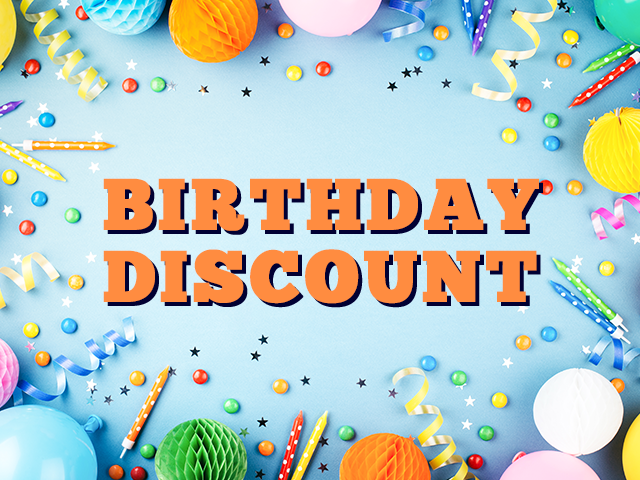
<style>
.page{position:relative;width:640px;height:480px}
.page>*{position:absolute;margin:0}
.t1{font:72px/72px "ChunkFive-Roman";letter-spacing:0.05em;color:#ff8c40;text-transform:uppercase;font-weight:bold}
</style>
<div class="page">
<p class="t1" style="left:103px;top:178px;width:436px;height:126px;text-align:center">Birthday<br>Discount</p>
</div>
